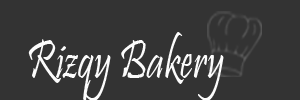
<style>
.page{position:relative;width:300px;height:100px;background:#333333}
.page>*{position:absolute;margin:0}
.t1{font:54.9px "Pristina-Regular";color:#fcfcfc;scale:0.79 1}
</style>
<div class="page">
<p class="t1" style="left:28px;top:32px;width:196px;height:70px">Rizqy Bakery</p>
</div>
